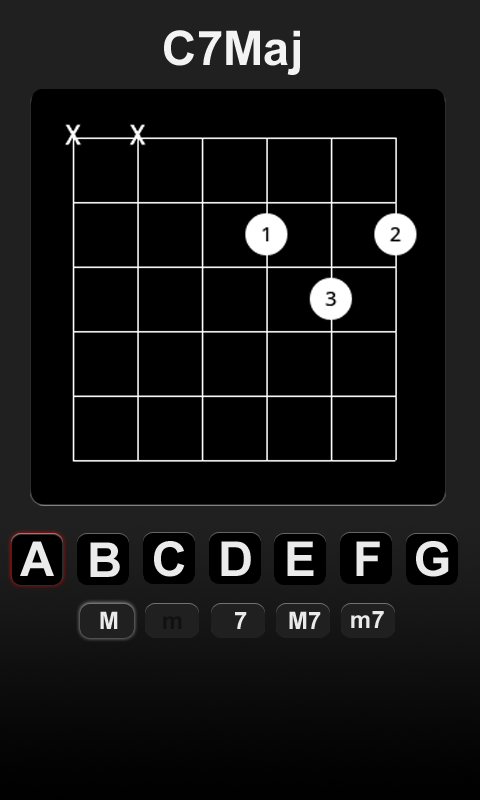
<style>
.page{position:relative;width:480px;height:800px;background:#000000}
.page>*{position:absolute;margin:0}
.t1{font:47.8px "Arial-BoldMT";color:#f3f3f3}
.t2{font:48px "Arial-BoldMT";color:#ebebeb}
.t3{font:24px "Arial-BoldMT";color:#ebebeb}
.t4{font:24px "Arial-BoldMT";color:#111111}
</style>
<div class="page">
<p class="t1" style="left:164px;top:30px;width:136px;height:45px">C7Maj</p>
<p class="t2" style="left:20px;top:541px;width:34px;height:35px">A</p>
<p class="t2" style="left:90px;top:542px;width:30px;height:35px">B</p>
<p class="t2" style="left:154px;top:541px;width:31px;height:36px">C</p>
<p class="t2" style="left:221px;top:541px;width:30px;height:35px">D</p>
<p class="t2" style="left:287px;top:541px;width:27px;height:35px">E</p>
<p class="t2" style="left:356px;top:541px;width:24px;height:35px">F</p>
<p class="t2" style="left:416px;top:541px;width:33px;height:36px">G</p>
<p class="t3" style="left:100px;top:611px;width:18px;height:18px">M</p>
<p class="t4" style="left:163px;top:616px;width:19px;height:13px">m</p>
<p class="t3" style="left:235px;top:612px;width:12px;height:17px">7</p>
<p class="t3" style="left:289px;top:611px;width:32px;height:18px">M7</p>
<p class="t3" style="left:351px;top:611px;width:33px;height:17px">m7</p>
</div>
